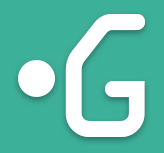
<style>
.page{position:relative;width:164px;height:153px;background:#3db099}
.page>*{position:absolute;margin:0}
.t1{font:190px "OCRAExtended";color:#ffffff}
</style>
<div class="page">
<p class="t1" style="left:65px;top:14px;width:81px;height:123px">G</p>
</div>
